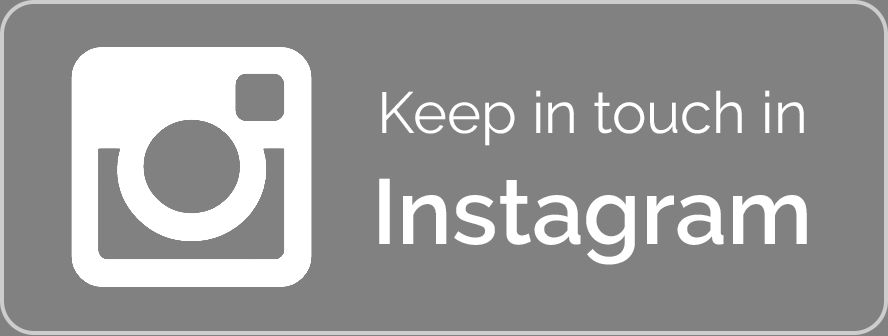
<style>
.page{position:relative;width:888px;height:336px;background:#818181}
.page>*{position:absolute;margin:0}
.t1{font:58px "Raleway-Regular";color:#ffffff}
.t2{font:92px "Raleway-SemiBold";color:#ffffff}
</style>
<div class="page">
<p class="t1" style="left:379px;top:90px;width:428px;height:175px;text-align:center">Keep in touch in<br><span class="t2">Instagram</span></p>
</div>
